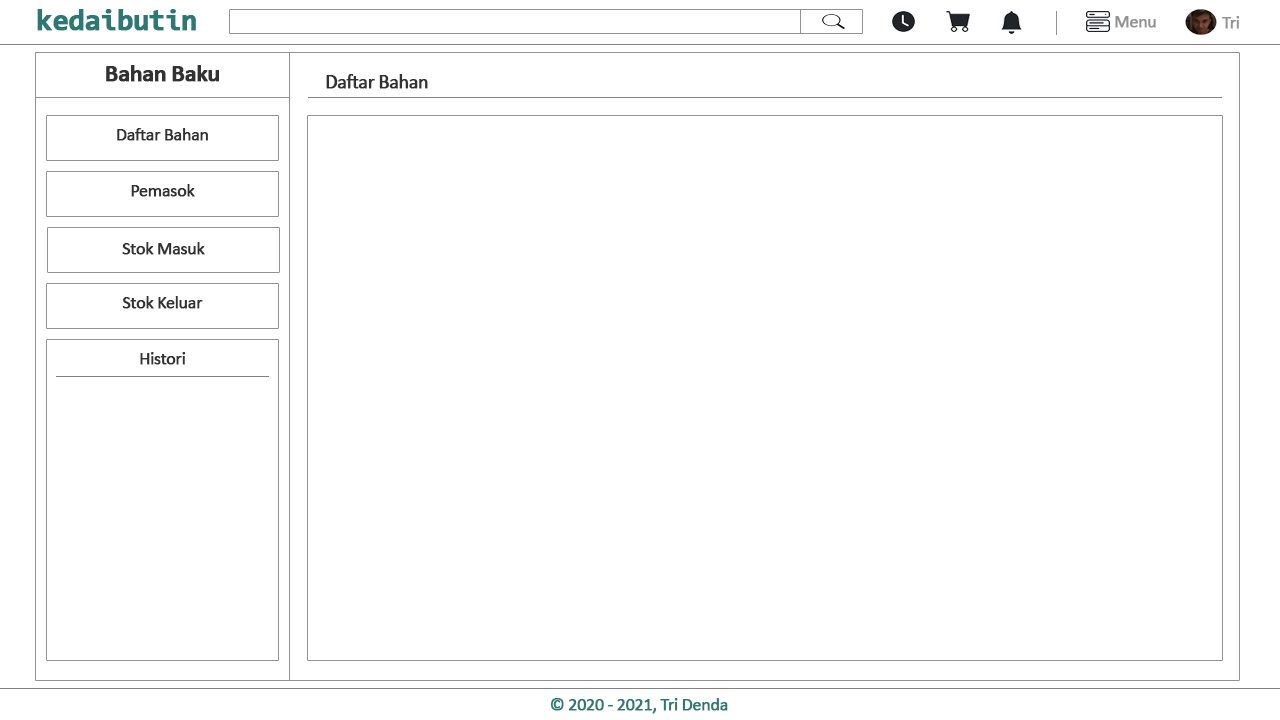
<style>
.page{position:relative;width:1280px;height:720px;background:#ffffff}
.page>*{position:absolute;margin:0}
.t1{font:30px "Consolas-Bold";letter-spacing:-0.04em;color:#2c7873;font-weight:bold}
.t2{font:18px "Calibri";letter-spacing:-0.04em;color:#929292;font-weight:bold}
.t3{font:24px "Calibri-Bold";letter-spacing:-0.04em;color:#323232;font-weight:bold}
.t4{font:20px "Calibri";letter-spacing:-0.04em;color:#323232;font-weight:bold}
.t5{font:18px "Calibri";letter-spacing:-0.04em;color:#323232;font-weight:bold}
.t6{font:18px "Calibri";letter-spacing:-0.04em;color:#2c7873;font-weight:bold}
</style>
<div class="page">
<p class="t1" style="left:37px;top:9px;width:159px;height:22px">kedaibutin</p>
<p class="t2" style="left:1115px;top:16px;width:41px;height:12px">Menu</p>
<p class="t2" style="left:1222px;top:16px;width:18px;height:13px">Tri</p>
<p class="t3" style="left:106px;top:65px;width:113px;height:17px">Bahan Baku</p>
<p class="t4" style="left:326px;top:74px;width:102px;height:15px">Daftar Bahan</p>
<p class="t5" style="left:117px;top:128px;width:91px;height:13px">Daftar Bahan</p>
<p class="t5" style="left:131px;top:184px;width:64px;height:13px">Pemasok</p>
<p class="t5" style="left:122px;top:242px;width:83px;height:13px">Stok Masuk</p>
<p class="t5" style="left:122px;top:296px;width:81px;height:13px">Stok Keluar</p>
<p class="t5" style="left:140px;top:352px;width:46px;height:13px">Histori</p>
<p class="t6" style="left:550px;top:698px;width:178px;height:16px">© 2020 - 2021, Tri Denda</p>
</div>
